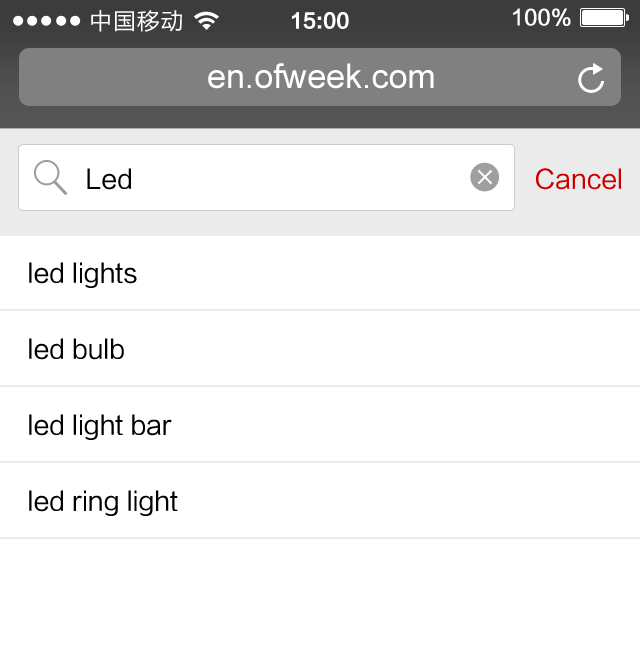
<style>
.page{position:relative;width:640px;height:657px;background:#ffffff}
.page>*{position:absolute;margin:0}
.t1{font:26px "FZLTHJW--GB1-0";color:#000000}
.t2{font:26px "FZLTHJW--GB1-0";color:#cc0000}
.t3{font:26px/76px "FZLTHJW--GB1-0";color:#000000}
</style>
<div class="page">
<p class="t1" style="left:87px;top:168px;width:44px;height:22px">Led</p>
<p class="t2" style="left:536px;top:168px;width:85px;height:22px">Cancel</p>
<p class="t3" style="left:29px;top:262px;width:149px;height:254px">led lights<br>led bulb<br>led light bar<br>led ring light</p>
</div>
